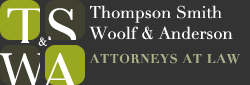
<style>
.page{position:relative;width:250px;height:85px;background:#333333}
.page>*{position:absolute;margin:0}
.t1{font:16.7px/20.8px "Didot";color:#ffffff}
.t2{font:54.2px "Baskerville";color:#ffffff}
.t3{font:62.5px "Baskerville";color:#ffffff}
.t4{font:12.5px "Baskerville";color:#ffffff}
.t5{font:12.5px "Didot-Bold";letter-spacing:0.06em;color:#a8b189}
</style>
<div class="page">
<p class="t1" style="left:89px;top:5px;width:144px;height:35px">Thompson Smith<br>Woolf &amp; Anderson</p>
<p class="t2" style="left:7px;top:8px;width:36px;height:37px">T</p>
<p class="t3" style="left:48px;top:8px;width:28px;height:44px">S</p>
<p class="t4" style="left:38px;top:37px;width:10px;height:9px">&amp;</p>
<p class="t5" style="left:89px;top:53px;width:151px;height:11px">ATTORNEYS AT LAW</p>
</div>
